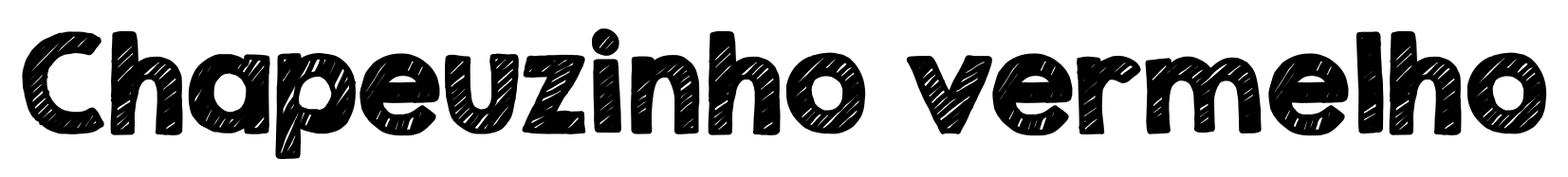
<style>
.page{position:relative;width:1568px;height:177px;background:#ffffff}
.page>*{position:absolute;margin:0}
.t1{font:118.6px "KGSecondChancesSketch";color:#000000;font-weight:bold}
</style>
<div class="page">
<p class="t1" style="left:22px;top:28px;width:1525px;height:131px">Chapeuzinho vermelho</p>
</div>
